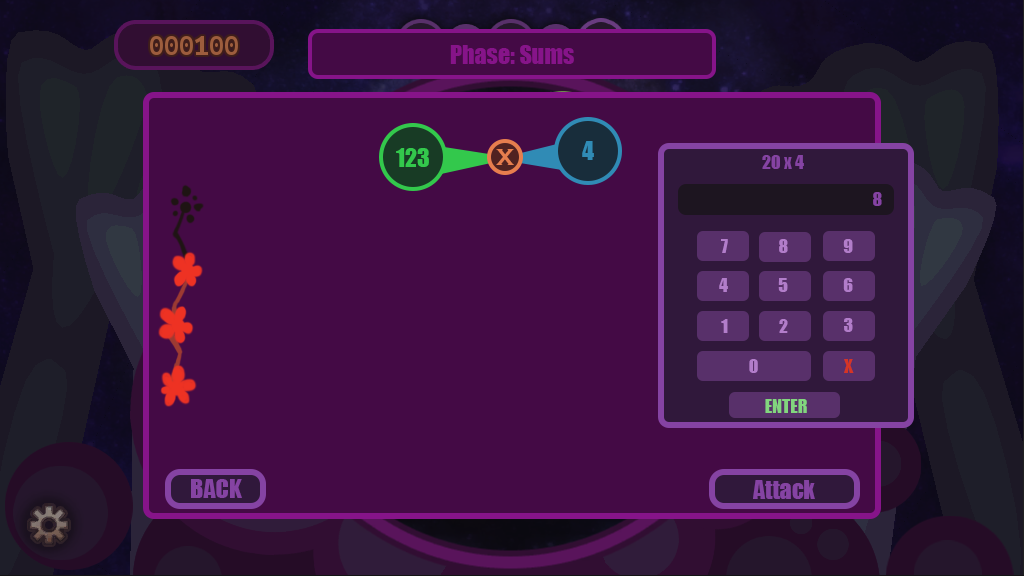
<style>
.page{position:relative;width:1024px;height:576px;background:#440a45}
.page>*{position:absolute;margin:0}
.t1{font:24px "Impact";color:#861489}
.t2{font:24px "Impact";color:#33c84c}
.t3{font:24px "CopperplateGothic-Bold";color:#e77e4e}
.t4{font:24px "Impact";color:#308bb5}
.t5{font:18px "Impact";color:#8543a3}
.t6{font:18px "Impact";color:#b27dca}
.t7{font:18px "Impact";color:#d53525}
.t8{font:18px "Impact";color:#82d57e}
.t9{font:24px "Impact";color:#8543a3}
</style>
<div class="page">
<p class="t1" style="left:450px;top:45px;width:124px;height:19px">Phase: Sums</p>
<p class="t2" style="left:396px;top:148px;width:33px;height:19px">123</p>
<p class="t3" style="left:496px;top:149px;width:18px;height:16px">X</p>
<p class="t4" style="left:582px;top:141px;width:12px;height:19px">4</p>
<p class="t5" style="left:762px;top:155px;width:42px;height:14px">20 x 4</p>
<p class="t5" style="left:873px;top:192px;width:9px;height:14px">8</p>
<p class="t6" style="left:721px;top:239px;width:7px;height:14px">7</p>
<p class="t6" style="left:779px;top:239px;width:9px;height:14px">8</p>
<p class="t6" style="left:843px;top:239px;width:10px;height:14px">9</p>
<p class="t6" style="left:719px;top:278px;width:9px;height:14px">4</p>
<p class="t6" style="left:778px;top:278px;width:10px;height:14px">5</p>
<p class="t6" style="left:843px;top:278px;width:10px;height:14px">6</p>
<p class="t6" style="left:844px;top:318px;width:9px;height:14px">3</p>
<p class="t6" style="left:721px;top:319px;width:7px;height:14px">1</p>
<p class="t6" style="left:779px;top:319px;width:9px;height:14px">2</p>
<p class="t6" style="left:749px;top:359px;width:9px;height:14px">0</p>
<p class="t7" style="left:844px;top:359px;width:10px;height:14px">X</p>
<p class="t8" style="left:765px;top:399px;width:42px;height:14px">ENTER</p>
<p class="t9" style="left:191px;top:479px;width:51px;height:19px">BACK</p>
<p class="t9" style="left:753px;top:480px;width:62px;height:19px">Attack</p>
</div>
